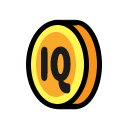
<style>
.page{position:relative;width:128px;height:128px;background:#ffffff}
.page>*{position:absolute;margin:0}
.t1{font:50px "Coiny-Regular";color:#1b1b1b;scale:0.57 1}
</style>
<div class="page">
<p class="t1" style="left:41px;top:46px;width:30px;height:48px">IQ</p>
</div>
